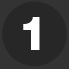
<style>
.page{position:relative;width:69px;height:69px;background:#272727}
.page>*{position:absolute;margin:0}
.t1{font:47px "HelveticaNeueLTStd-Hv";color:#ffffff}
</style>
<div class="page">
<p class="t1" style="left:23px;top:17px;width:17px;height:33px">1</p>
</div>
